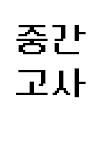
<style>
.page{position:relative;width:100px;height:141px;background:#ffffff}
.page>*{position:absolute;margin:0}
.t1{font:36px "DungGeunMo-Regular";color:#000000}
</style>
<div class="page">
<p class="t1" style="left:16px;top:25px;width:70px;height:73px;text-align:center">중간<br>고사</p>
</div>
